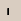
<style>
.page{position:relative;width:21px;height:21px;background:#d9cdc1}
.page>*{position:absolute;margin:0}
.t1{font:9px "Tahoma-Bold";color:#000000}
</style>
<div class="page">
<p class="t1" style="left:7px;top:8px;width:2px;height:7px">l</p>
</div>
